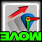
<style>
.page{position:relative;width:42px;height:42px}
.page>*{position:absolute;margin:0}
.t1{font:11.2px "Arial-Black";letter-spacing:-0.075em;color:#24ff00;scale:1.25 1}
</style>
<div class="page">
<p class="t1" style="left:0px;top:32px;width:41px;height:9px;rotate:-180deg">MOVE</p>
</div>
